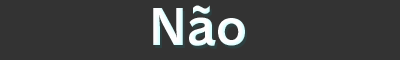
<style>
.page{position:relative;width:400px;height:60px;background:#333333}
.page>*{position:absolute;margin:0}
.t1{font:48px "RodinPro-B";color:#fffeff}
</style>
<div class="page">
<p class="t1" style="left:153px;top:5px;width:92px;height:41px">Não</p>
</div>
